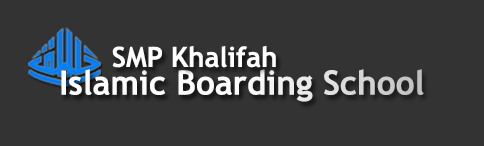
<style>
.page{position:relative;width:484px;height:146px;background:#333333}
.page>*{position:absolute;margin:0}
.t1{font:27.9px "TrebuchetMS-Bold";color:#ffffff}
.t2{font:33.5px "TrebuchetMS-Bold";color:#ffffff}
</style>
<div class="page">
<p class="t1" style="left:112px;top:45px;width:164px;height:23px">SMP Khalifah</p>
<p class="t2" style="left:61px;top:69px;width:363px;height:33px">Islamic Boarding School</p>
</div>
